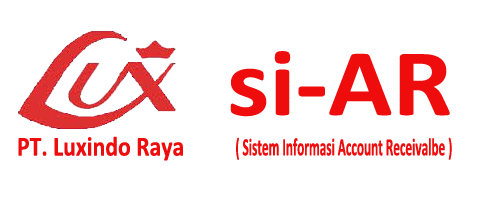
<style>
.page{position:relative;width:500px;height:200px;background:#ffffff}
.page>*{position:absolute;margin:0}
.t1{font:96.2px "Calibri-Bold";color:#ef0c0c;scale:1.1 1}
.t2{font:27.7px "Calibri-Bold";color:#ef0c0c;scale:0.86 1}
.t3{font:25px "Calibri-Bold";color:#ef0c0c;scale:0.53 1}
</style>
<div class="page">
<p class="t1" style="left:230px;top:51px;width:220px;height:66px">si-AR</p>
<p class="t2" style="left:18px;top:136px;width:165px;height:25px">PT. Luxindo Raya</p>
<p class="t3" style="left:236px;top:137px;width:216px;height:23px">( Sistem Informasi Account Receivalbe )</p>
</div>
